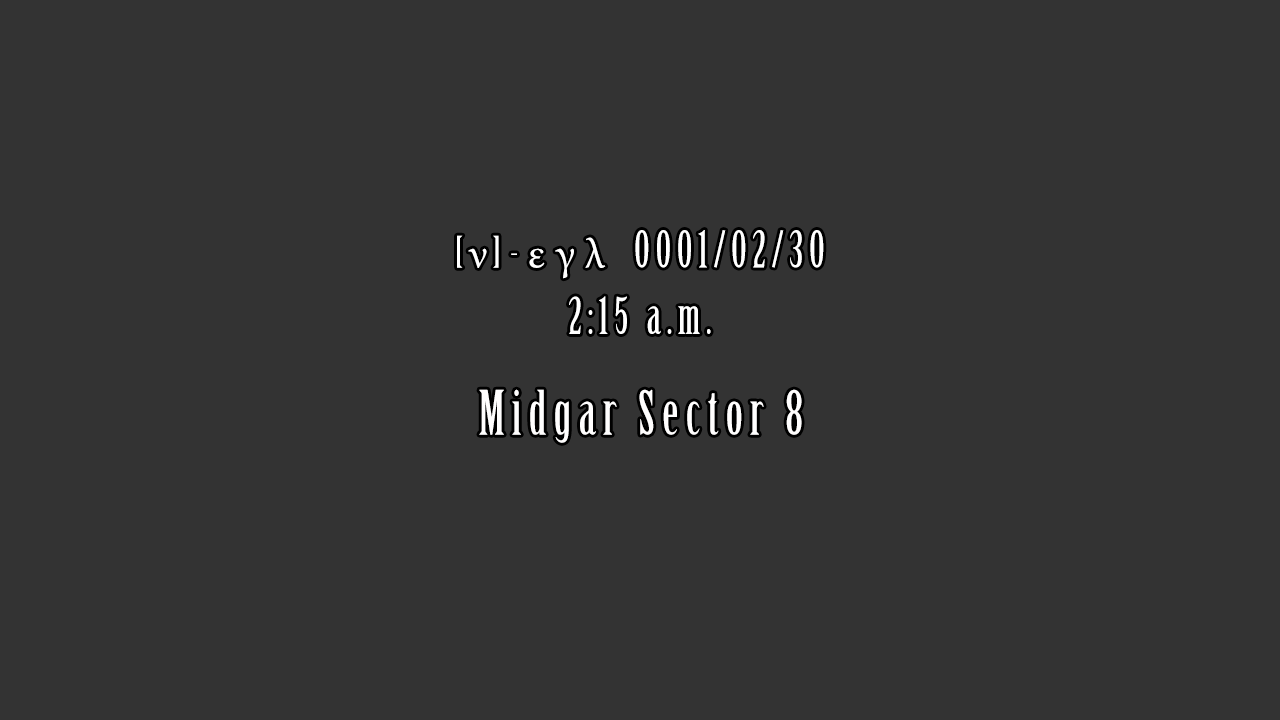
<style>
.page{position:relative;width:1280px;height:720px;background:#333333}
.page>*{position:absolute;margin:0}
.t1{font:50px "BirchStd";color:#ffffff}
.t2{font:42px "BirchStd";color:#ffffff}
.t3{font:42px "MinionPro-Regular";color:#ffffff}
.t4{font:60px "BirchStd";color:#fffefe}
</style>
<div class="page">
<p class="t1" style="left:457px;top:230px;width:367px;height:49px"><span class="t2">[ </span><span class="t3">ν</span><span class="t2"> ]  -  </span><span class="t3">ε γ λ  </span> 0 0 0 1 / 0 2 / 3 0</p>
<p class="t1" style="left:569px;top:296px;width:142px;height:38px">2 : 1 5   a . m .</p>
<p class="t4" style="left:479px;top:389px;width:323px;height:54px">M i d g a r   S e c t o r   8</p>
</div>
